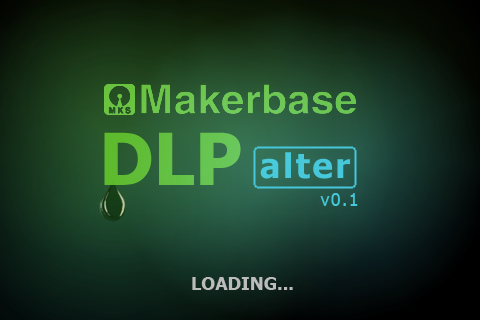
<style>
.page{position:relative;width:480px;height:320px}
.page>*{position:absolute;margin:0}
.t1{font:72px "Tahoma-Bold";color:#6bd22f}
.t2{font:34px "Tahoma-Bold";letter-spacing:0.075em;color:#48c9db}
.t3{font:18px "Tahoma";letter-spacing:0.075em;color:#47c7da}
.t4{font:18px "Tahoma-Bold";color:#bcbcbc}
</style>
<div class="page">
<p class="t1" style="left:104px;top:132px;width:137px;height:53px">DLP</p>
<p class="t2" style="left:260px;top:152px;width:90px;height:27px">alter</p>
<p class="t3" style="left:320px;top:193px;width:38px;height:13px">v0.1</p>
<p class="t4" style="left:192px;top:277px;width:101px;height:13px">LOADING...</p>
</div>
